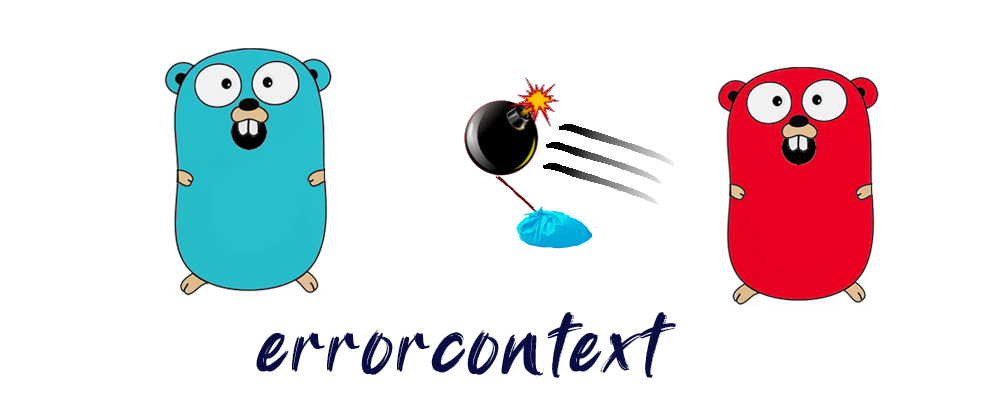
<style>
.page{position:relative;width:1000px;height:400px;background:#ffffff}
.page>*{position:absolute;margin:0}
.t1{font:86.3px "Golang";letter-spacing:0.045em;color:#080c42;font-style:italic}
</style>
<div class="page">
<p class="t1" style="left:256px;top:312px;width:420px;height:66px">errorcontext</p>
</div>
